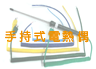
<style>
.page{position:relative;width:96px;height:69px;background:#ffffff}
.page>*{position:absolute;margin:0}
.t1{font:12px "AdobeFanHeitiStd-Bold";letter-spacing:0.2em;color:#f09000}
</style>
<div class="page">
<p class="t1" style="left:5px;top:30px;width:84px;height:13px">手持式電熱偶</p>
</div>
